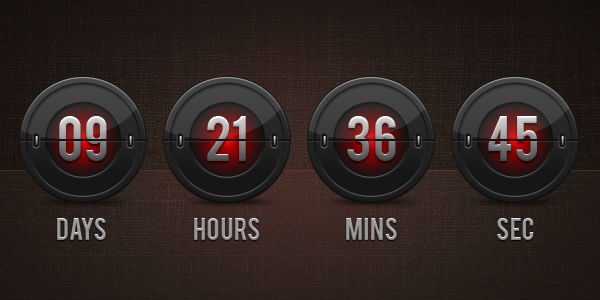
<style>
.page{position:relative;width:600px;height:300px}
.page>*{position:absolute;margin:0}
.t1{font:50px "Bebas"}
.t2{font:25px "Bebas";color:#9a9a9a}
.t3{font:25px "Bebas";color:#979797}
.t4{font:25px "Bebas";color:#999999}
.t5{font:25px "Bebas"}
</style>
<div class="page">
<p class="t1" style="left:59px;top:116px;width:48px;height:45px">09</p>
<p class="t1" style="left:207px;top:116px;width:39px;height:45px">21</p>
<p class="t1" style="left:347px;top:116px;width:49px;height:45px">36</p>
<p class="t1" style="left:488px;top:116px;width:50px;height:45px">45</p>
<p class="t2" style="left:57px;top:218px;width:49px;height:22px">days</p>
<p class="t3" style="left:194px;top:218px;width:66px;height:22px">hours</p>
<p class="t4" style="left:346px;top:218px;width:51px;height:22px">mins</p>
<p class="t5" style="left:497px;top:218px;width:37px;height:22px">sec</p>
</div>
